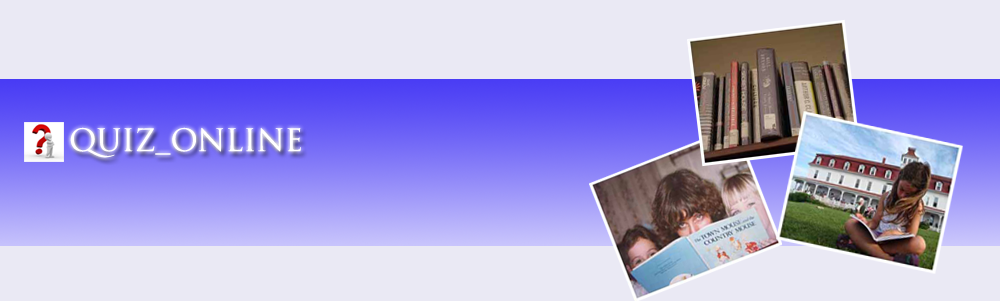
<style>
.page{position:relative;width:1000px;height:301px;background:#eae9f4}
.page>*{position:absolute;margin:0}
.t1{font:30px "TrajanPro-Regular";color:#ffffff}
</style>
<div class="page">
<p class="t1" style="left:70px;top:127px;width:231px;height:31px">QUIZ_ONLINE</p>
</div>
